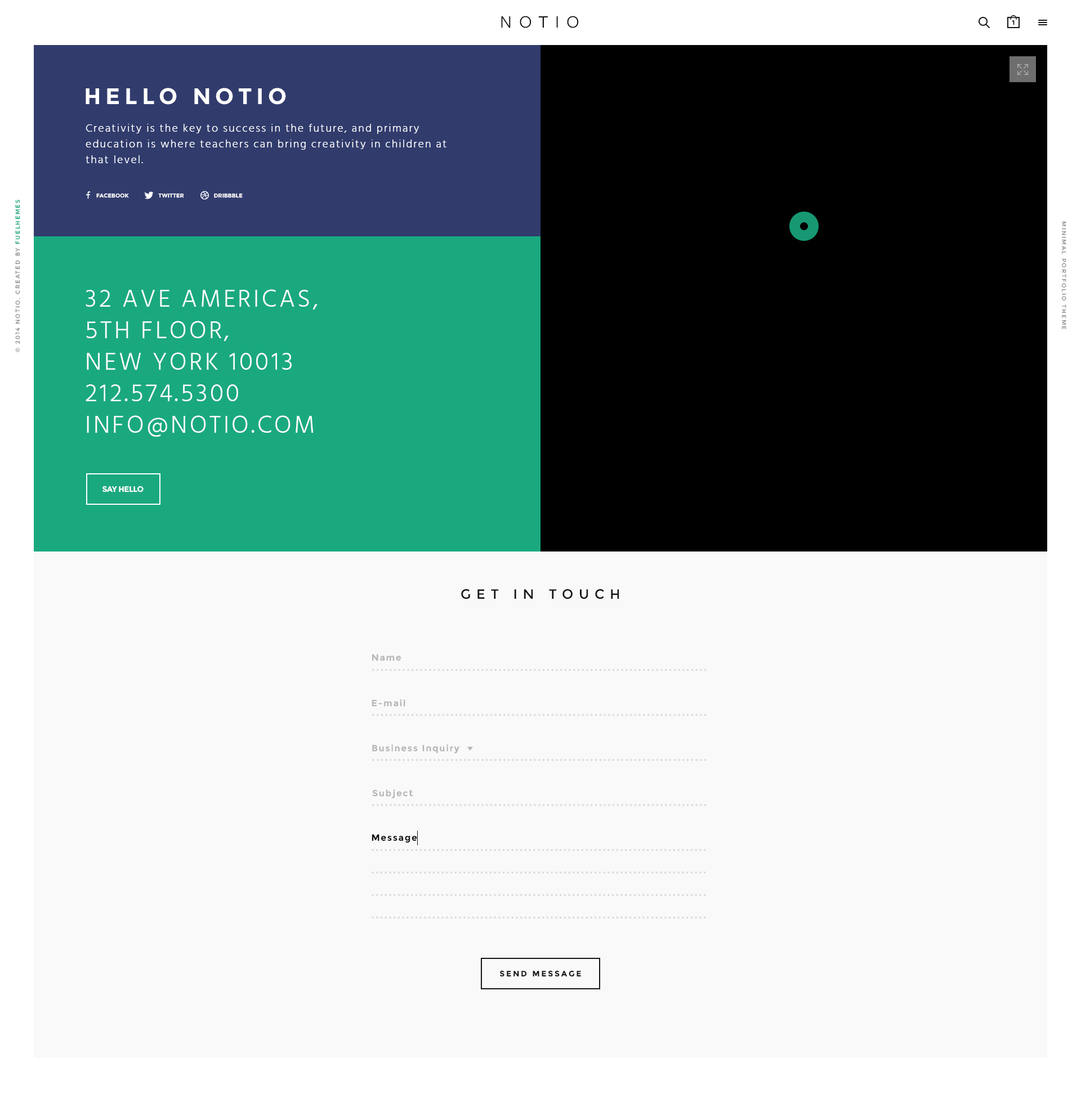
<style>
.page{position:relative;width:1081px;height:1103px;background:#f9f9f9}
.page>*{position:absolute;margin:0}
.t1{font:18px "FreightSansProBook-Regular";letter-spacing:0.4em;color:#121212}
.t2{font:6.8px "Hind-Bold";letter-spacing:0.2em;color:#151515;text-transform:uppercase}
.t3{font:22.5px "Montserrat-Bold";letter-spacing:0.2em;color:#ffffff}
.t4{font:11.3px/15.8px "Hind-Light";letter-spacing:0.1em;color:#ffffff}
.t5{font:5.6px "Montserrat-Bold";color:#ffffff;text-transform:uppercase}
.t6{font:5.7px "Montserrat-Regular";letter-spacing:0.2em;color:#909090;text-transform:uppercase}
.t7{font:5.7px "Montserrat-Regular";letter-spacing:0.2em;color:#1aa97f;text-transform:uppercase}
.t8{font:5.7px "Montserrat-Regular";letter-spacing:0.2em;color:#909090}
.t9{font:24.8px/31.5px "Hind-Light";letter-spacing:0.1em;color:#ffffff;text-transform:uppercase}
.t10{font:7.9px "Montserrat-Bold";letter-spacing:-0.04em;color:#ffffff;text-transform:uppercase}
.t11{font:13.5px "Montserrat-Regular";letter-spacing:0.4em;color:#151515;text-transform:uppercase}
.t12{font:9px "Montserrat-Bold";letter-spacing:0.1em;color:#b6b6b6}
.t13{font:11.3px "Montserrat-Bold";letter-spacing:0.1em;color:#d9d9d9}
.t14{font:9px "Montserrat-Bold";letter-spacing:0.1em;color:#121212}
.t15{font:7.9px "Montserrat-Bold";letter-spacing:0.2em;color:#151515;text-transform:uppercase}
</style>
<div class="page">
<p class="t1" style="left:501px;top:16px;width:78px;height:12px">NOTIO</p>
<p class="t2" style="left:1012px;top:20px;width:2px;height:5px">1</p>
<p class="t3" style="left:86px;top:88px;width:200px;height:17px">HELLO NOTIO</p>
<p class="t4" style="left:86px;top:124px;width:360px;height:39px;text-align:right">Creativity is the key to success in the future, and primary <br>education is where teachers can bring creativity in children at <br>that level.</p>
<p class="t5" style="left:96px;top:193px;width:147px;height:5px">FACEBOOK                    TWITTER                    DRIBBBLE</p>
<p class="t6" style="left:15px;top:200px;width:5px;height:152px;rotate:-90deg">© 2014 NOTIO. Created by <span class="t7">FUELhemes</span></p>
<p class="t8" style="left:1062px;top:221px;width:4px;height:109px;rotate:90deg">MINIMAL PORTFOLIO THEME</p>
<p class="t9" style="left:86px;top:289px;width:231px;height:148px;text-align:right">32 Ave Americas,<br>5th Floor,<br>New York 10013<br>212.574.5300<br>info@NOTIO.com</p>
<p class="t10" style="left:102px;top:486px;width:42px;height:7px">SAY HELLO</p>
<p class="t11" style="left:461px;top:589px;width:158px;height:10px">GET IN TOUCH</p>
<p class="t12" style="left:372px;top:654px;width:29px;height:7px">Name</p>
<p class="t13" style="left:372px;top:669px;width:334px;height:3px">.............................................................................</p>
<p class="t12" style="left:372px;top:700px;width:33px;height:7px">E-mail</p>
<p class="t13" style="left:372px;top:714px;width:334px;height:3px">.............................................................................</p>
<p class="t12" style="left:372px;top:745px;width:87px;height:9px">Business Inquiry</p>
<p class="t13" style="left:372px;top:759px;width:334px;height:3px">.............................................................................</p>
<p class="t12" style="left:372px;top:790px;width:41px;height:9px">Subject</p>
<p class="t13" style="left:372px;top:804px;width:334px;height:3px">.............................................................................</p>
<p class="t14" style="left:372px;top:834px;width:45px;height:9px">Message</p>
<p class="t13" style="left:372px;top:849px;width:334px;height:3px">.............................................................................</p>
<p class="t13" style="left:372px;top:871px;width:334px;height:3px">.............................................................................</p>
<p class="t13" style="left:372px;top:894px;width:334px;height:3px">.............................................................................</p>
<p class="t13" style="left:372px;top:916px;width:334px;height:3px">.............................................................................</p>
<p class="t15" style="left:499px;top:970px;width:82px;height:7px">SEND MESSAGE</p>
</div>
